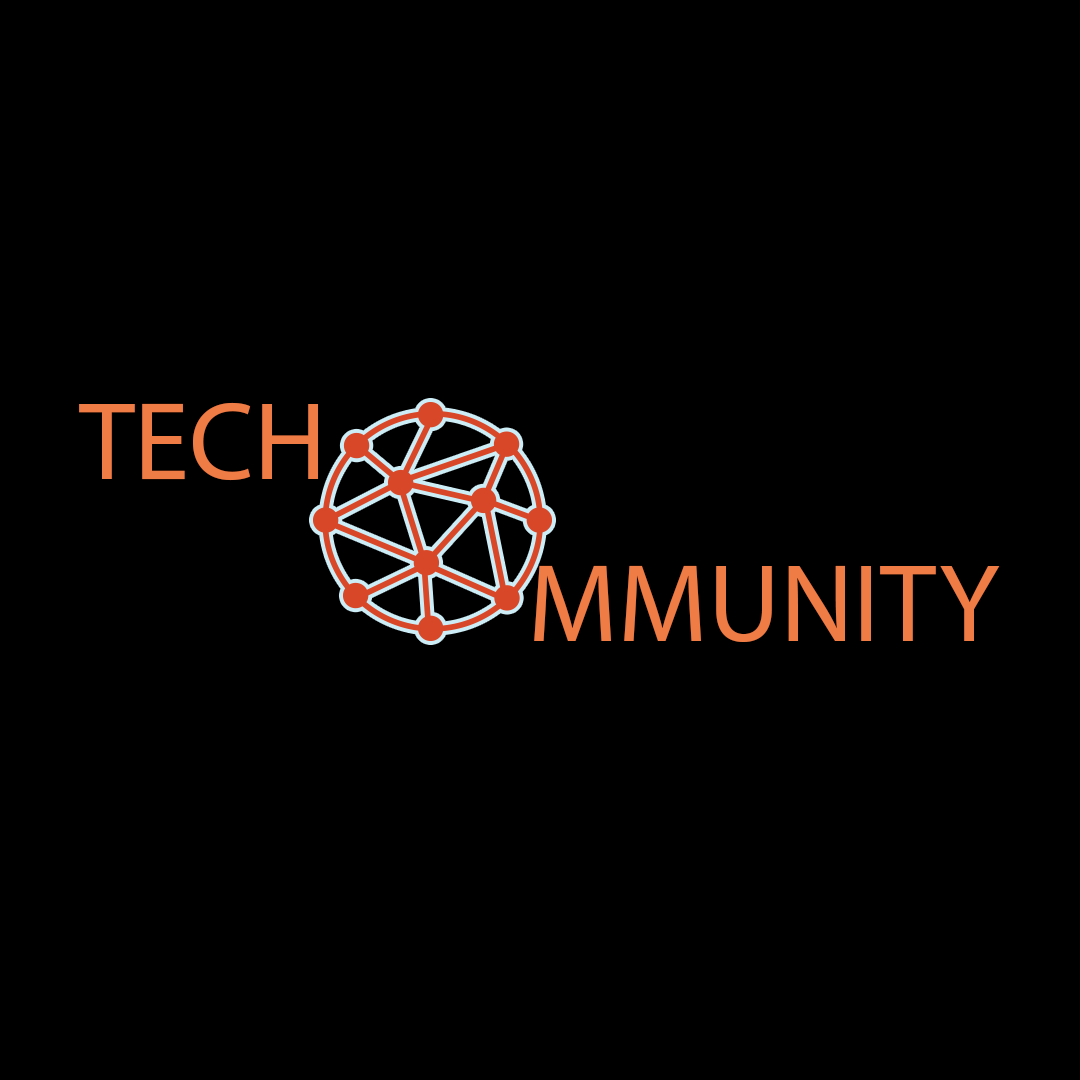
<style>
.page{position:relative;width:1080px;height:1080px;background:#000000}
.page>*{position:absolute;margin:0}
.t1{font:111.6px "MyriadPro-Regular";color:#ef7b45;text-transform:uppercase}
</style>
<div class="page">
<p class="t1" style="left:79px;top:402px;width:239px;height:79px">TECH</p>
<p class="t1" style="left:534px;top:565px;width:466px;height:77px">mmunity</p>
</div>
